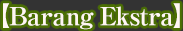
<style>
.page{position:relative;width:183px;height:31px;background:#333333}
.page>*{position:absolute;margin:0}
.t1{font:25px "RyuminPro-ExBold";letter-spacing:-0.04em;color:#fff6f3}
</style>
<div class="page">
<p class="t1" style="left:3px;top:3px;width:177px;height:27px">【Barang Ekstra】</p>
</div>
